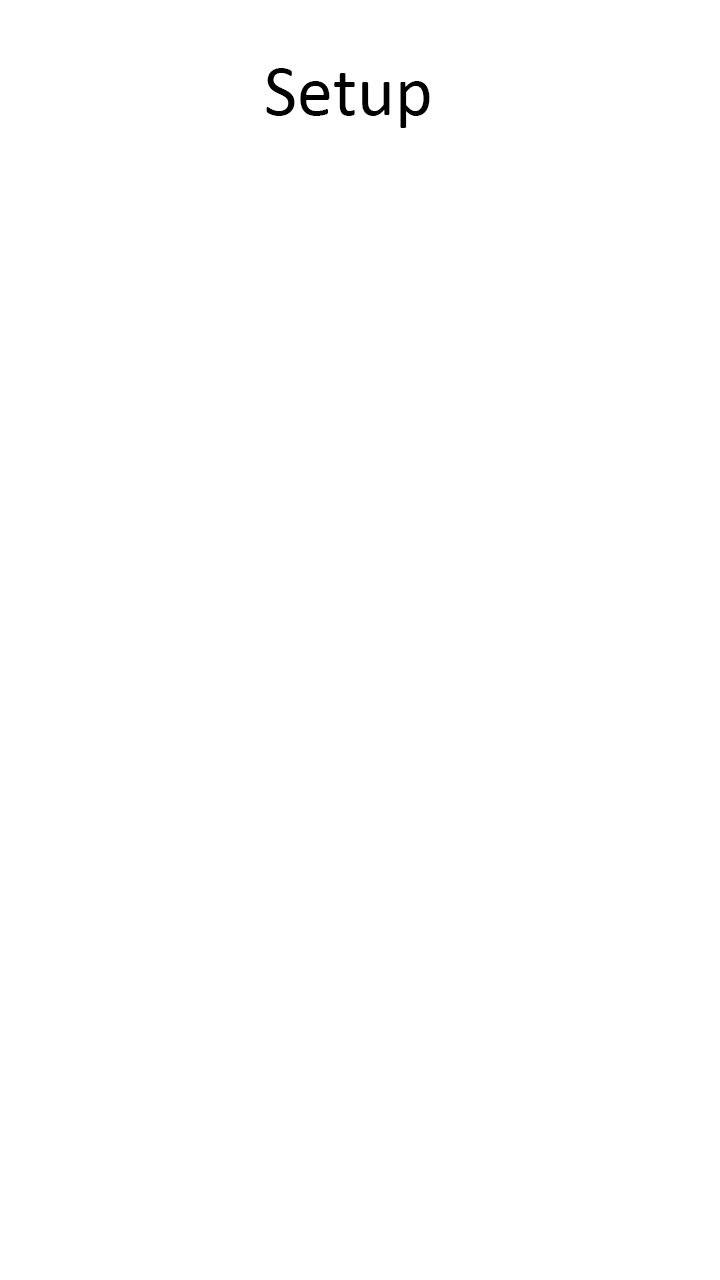
<style>
.page{position:relative;width:720px;height:1280px;background:#ffffff}
.page>*{position:absolute;margin:0}
.t1{font:72px "Calibri";color:#000000}
</style>
<div class="page">
<p class="t1" style="left:266px;top:68px;width:164px;height:60px">Setup</p>
</div>
